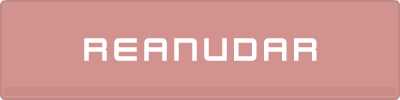
<style>
.page{position:relative;width:400px;height:100px;background:#d19290}
.page>*{position:absolute;margin:0}
.t1{font:36px "KenVector-Future";color:#ffffff}
</style>
<div class="page">
<p class="t1" style="left:84px;top:38px;width:233px;height:23px">Reanudar</p>
</div>
